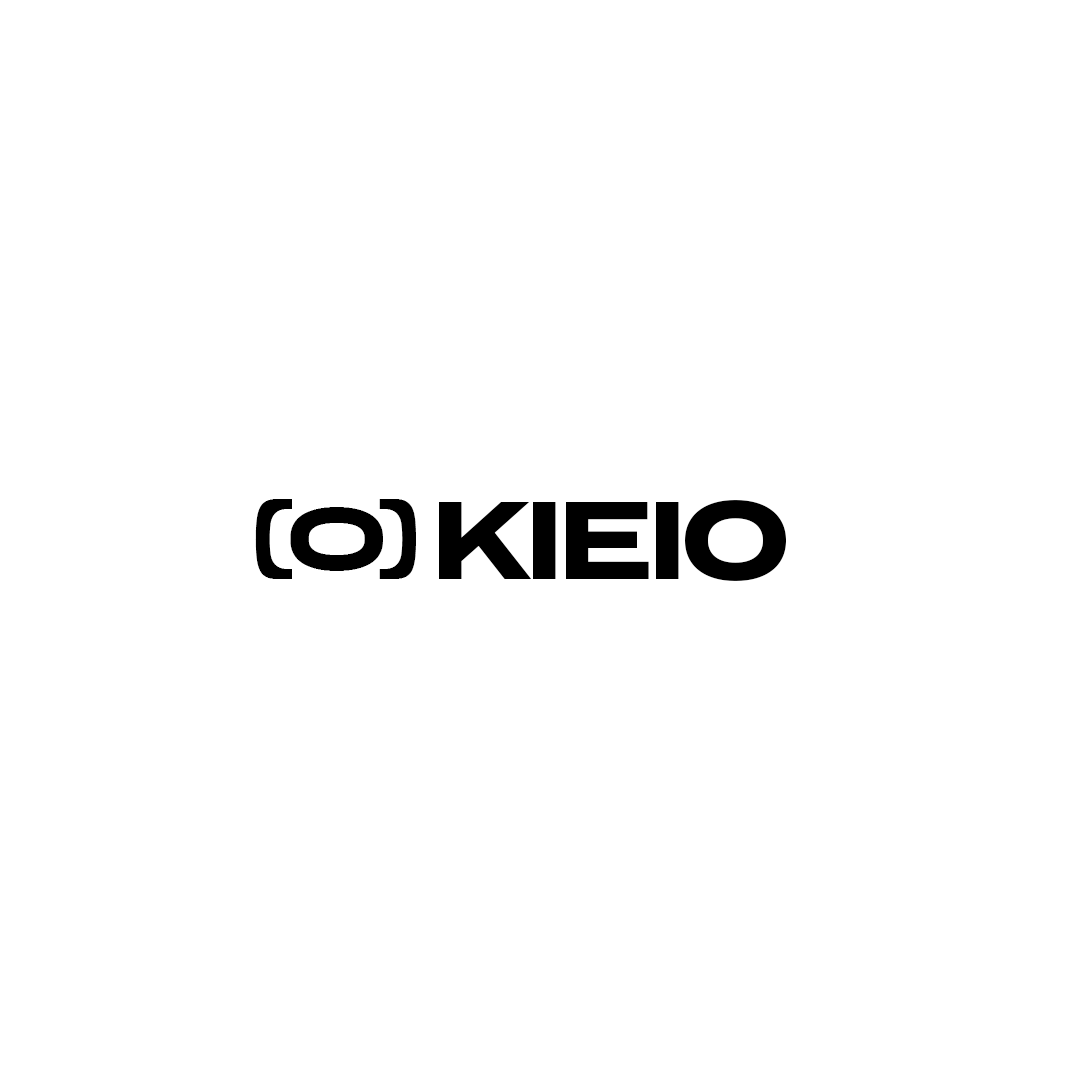
<style>
.page{position:relative;width:1080px;height:1080px;background:#ffffff}
.page>*{position:absolute;margin:0}
.t1{font:87.3px "GimbalExtended-Regular";letter-spacing:-0.025em;color:#000000}
.t2{font:110.5px "Termina-Bold";letter-spacing:-0.05em;color:#000000;text-transform:uppercase}
</style>
<div class="page">
<p class="t1" style="left:255px;top:499px;width:161px;height:80px">(o)</p>
<p class="t2" style="left:439px;top:500px;width:347px;height:81px">kieio</p>
</div>
